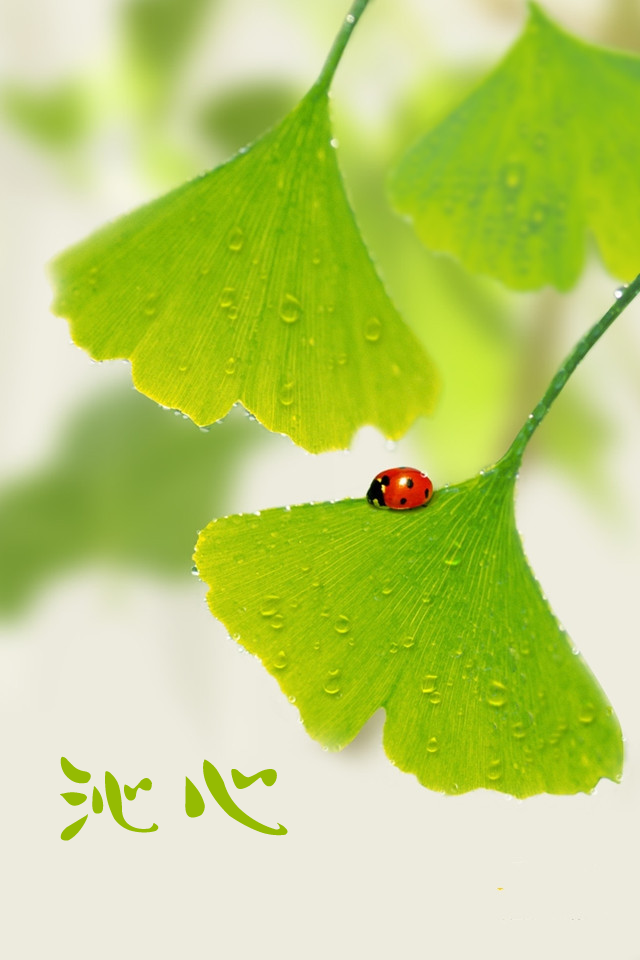
<style>
.page{position:relative;width:640px;height:960px;background:#edebde}
.page>*{position:absolute;margin:0}
.t1{font:133.3px "¾­µä·±ÖÐ±ä Regular";color:#95bb02}
</style>
<div class="page">
<p class="t1" style="left:60px;top:756px;width:228px;height:85px">沁心</p>
</div>
